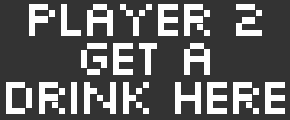
<style>
.page{position:relative;width:290px;height:120px;background:#333333}
.page>*{position:absolute;margin:0}
.t1{font:54px/39px "Silkscreen";letter-spacing:-0.12em;color:#ffffff}
</style>
<div class="page">
<p class="t1" style="left:6px;top:4px;width:279px;height:110px;text-align:center">Player 2<br>Get a<br>Drink Here</p>
</div>
